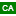
<style>
.page{position:relative;width:16px;height:16px;background:#008000}
.page>*{position:absolute;margin:0}
.t1{font:8.3px "ArialMT";color:#ffffff}
</style>
<div class="page">
<p class="t1" style="left:2px;top:5px;width:12px;height:6px">CA</p>
</div>
